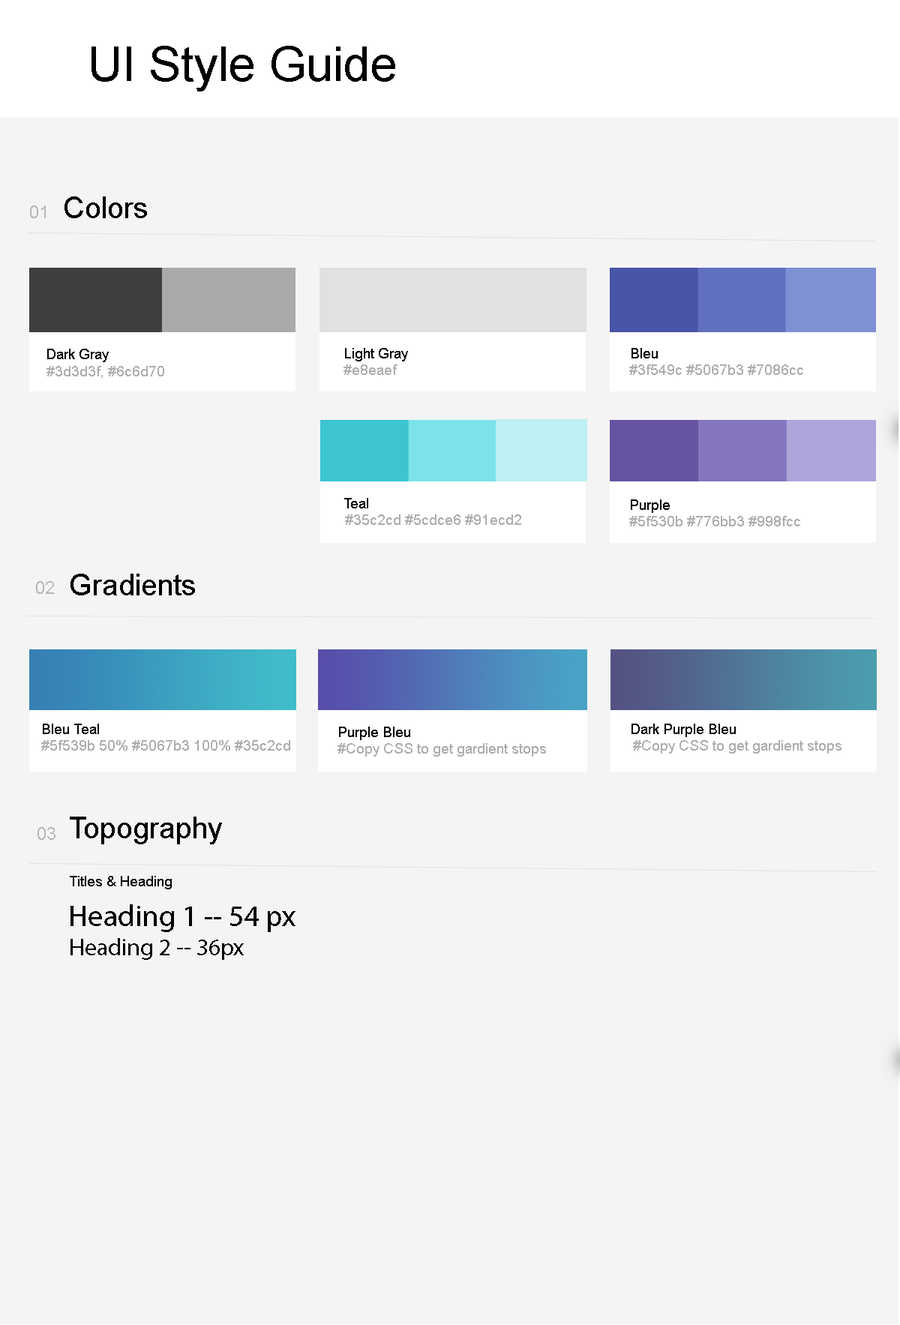
<style>
.page{position:relative;width:900px;height:1325px;background:#f4f4f4}
.page>*{position:absolute;margin:0}
.t1{font:48px "ArialMT";color:#000000}
.t2{font:30px "ArialMT";color:#000000}
.t3{font:18px "ArialMT";color:#b3b7b7}
.t4{font:14px "ArialMT";color:#b0acac}
.t5{font:14px "ArialMT";color:#000000}
.t6{font:14px "ArialMT";color:#050003}
.t7{font:30px "MyriadPro-Regular";color:#050003}
.t8{font:24px "MyriadPro-Regular";color:#050003}
</style>
<div class="page">
<p class="t1" style="left:91px;top:46px;width:304px;height:45px">UI Style Guide</p>
<p class="t2" style="left:64px;top:196px;width:83px;height:22px">Colors</p>
<p class="t3" style="left:30px;top:205px;width:16px;height:13px">01</p>
<p class="t4" style="left:46px;top:349px;width:118px;height:30px;text-align:center"><span class="t5">Dark Gray<br>               </span>#3d3d3f, #6c6d70</p>
<p class="t5" style="left:343px;top:348px;width:65px;height:27px;text-align:center">Light Gray<br><span class="t4">#e8eaef</span></p>
<p class="t4" style="left:629px;top:348px;width:174px;height:27px;text-align:right"><span class="t5">Bleu<br>                               </span>#3f549c #5067b3 #7086cc</p>
<p class="t4" style="left:344px;top:498px;width:177px;height:27px;text-align:center"><span class="t5">Teal<br>                                         </span>#35c2cd #5cdce6 #91ecd2</p>
<p class="t4" style="left:629px;top:499px;width:171px;height:27px;text-align:center"><span class="t5">Purple<br>                                   </span>#5f530b #776bb3 #998fcc</p>
<p class="t3" style="left:36px;top:581px;width:18px;height:13px">02</p>
<p class="t4" style="left:41px;top:724px;width:249px;height:27px;text-align:center"><span class="t5"> Bleu Teal<br></span>                                                    #5f539b 50% #5067b3 100% #35c2cd</p>
<p class="t4" style="left:631px;top:724px;width:210px;height:30px;text-align:center"><span class="t5">Dark Purple Bleu<br></span>    #Copy CSS to get gardient stops</p>
<p class="t4" style="left:337px;top:727px;width:209px;height:30px;text-align:center"><span class="t5">    Purple Bleu<br></span>                                        #Copy CSS to get gardient stops</p>
<p class="t2" style="left:70px;top:817px;width:152px;height:27px">Topography</p>
<p class="t3" style="left:37px;top:827px;width:18px;height:13px">03</p>
<p class="t6" style="left:70px;top:876px;width:102px;height:13px">Titles &amp; Heading</p>
<p class="t7" style="left:70px;top:904px;width:225px;height:28px">Heading 1 -- 54 px</p>
<p class="t8" style="left:70px;top:938px;width:174px;height:22px">Heading 2 -- 36px</p>
</div>
